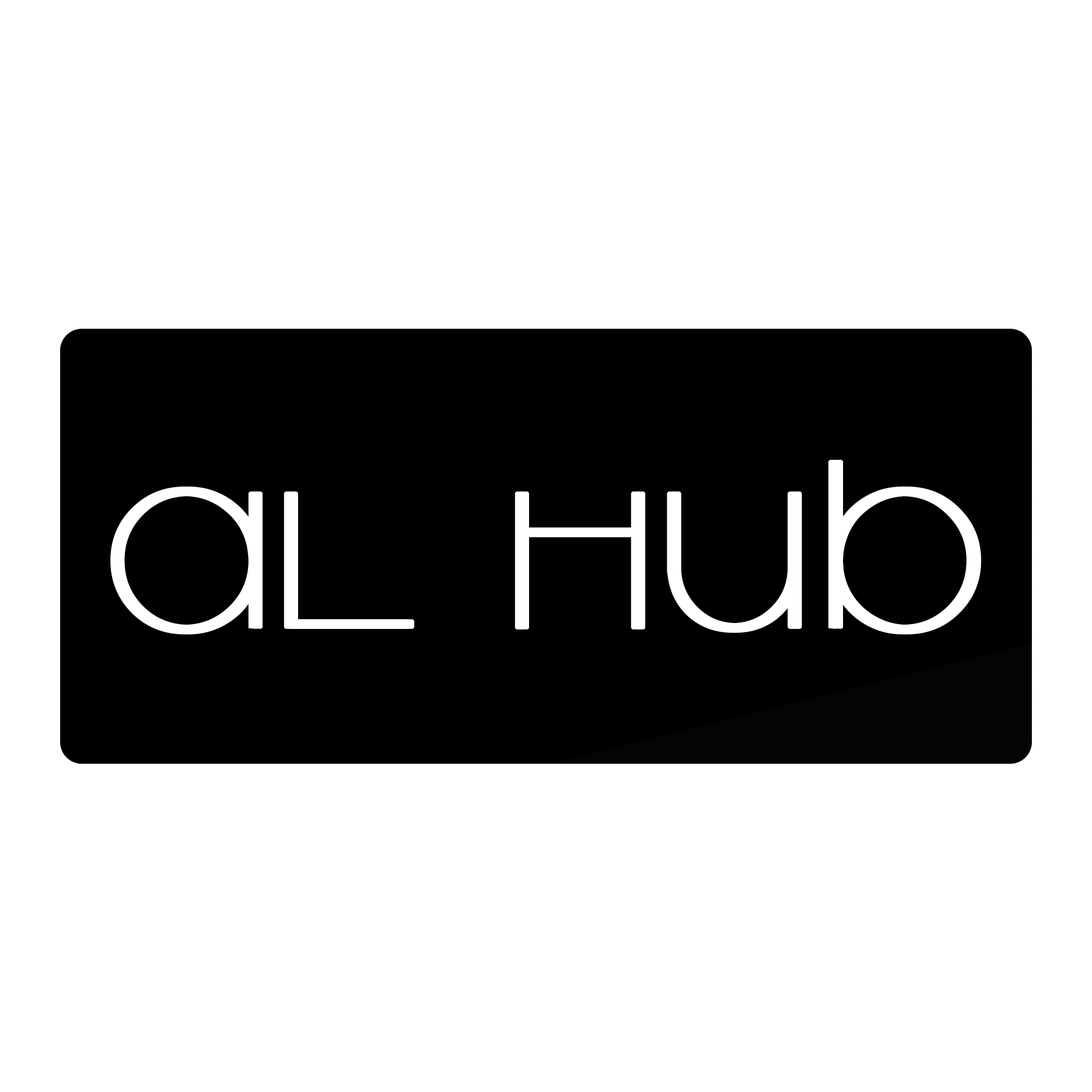
<style>
.page{position:relative;width:1092px;height:1092px;background:#ffffff}
.page>*{position:absolute;margin:0}
.t1{font:268.2px "NewGardenLight";letter-spacing:0.025em;color:#ffffff;font-weight:bold}
</style>
<div class="page">
<p class="t1" style="left:110px;top:460px;width:866px;height:174px">Al hub</p>
<p class="t1" style="left:115px;top:460px;width:866px;height:174px">Al hub</p>
</div>
